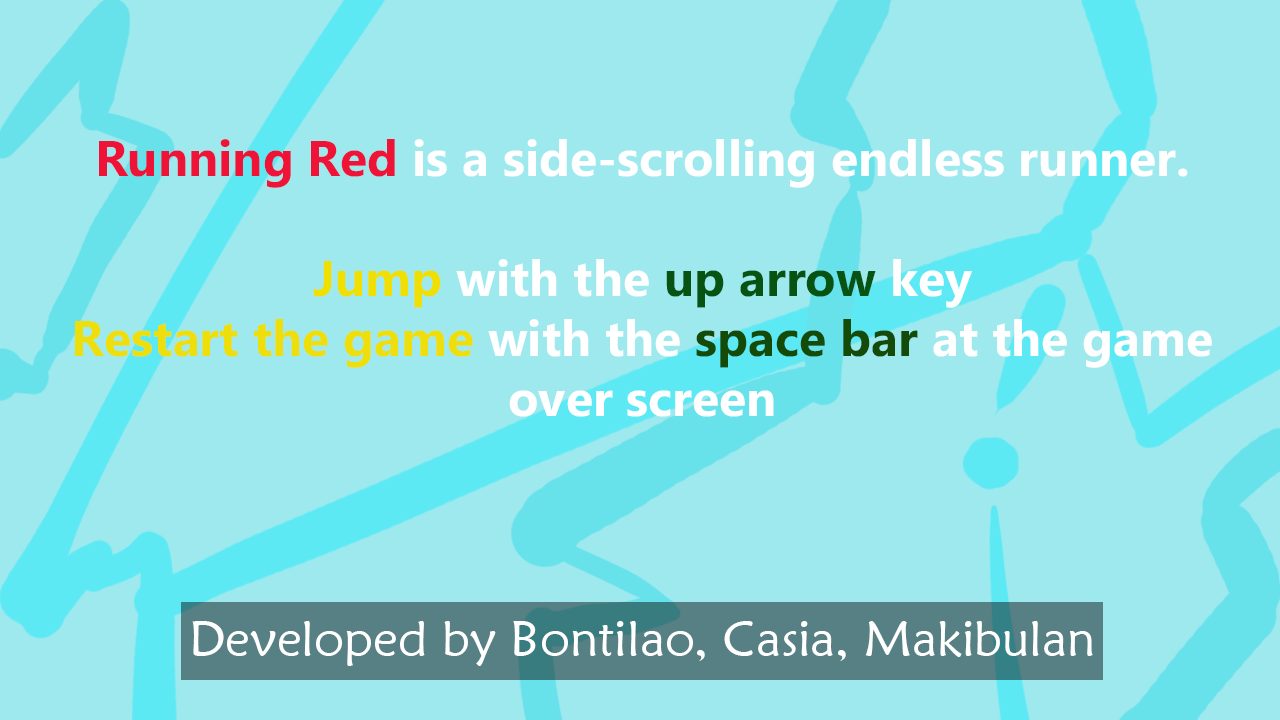
<style>
.page{position:relative;width:1280px;height:720px;background:#9de9ee}
.page>*{position:absolute;margin:0}
.t1{font:50px "MaiandraGD-Regular";color:#ffffff}
.t2{font:50px "MicrosoftPhagsPa-Bold";color:#395260}
.t3{font:50px "MicrosoftPhagsPa-Bold";color:#ef1337}
.t4{font:50px "MicrosoftPhagsPa-Bold";color:#ffffff}
.t5{font:50px "MicrosoftPhagsPa-Bold";color:#efdf02}
.t6{font:50px "MicrosoftPhagsPa-Bold";color:#075312}
.t7{font:50px "MicrosoftPhagsPa-Bold";color:#eedf0c}
.t8{font:50px "MicrosoftPhagsPa-Bold";color:#144b08}
</style>
<div class="page">
<p class="t1" style="left:75px;top:139px;width:1137px;height:527px;text-align:center"><span class="t2"><br><br></span><span class="t3">Running Red </span><span class="t4">is a side-scrolling endless runner.<br><br></span><span class="t5">Jump</span><span class="t4"> with the </span><span class="t6">up arrow</span><span class="t4"> key<br></span><span class="t7">Restart the game</span><span class="t4"> with the </span><span class="t8">space bar</span><span class="t4"> at the game over screen<br><br><br><br></span>Developed by Bontilao, Casia, Makibulan</p>
</div>
